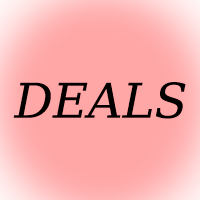
<style>
.page{position:relative;width:200px;height:200px;background:#ffa7a7}
.page>*{position:absolute;margin:0}
.t1{font:48px "DejaVuSerif-Italic";color:#000000}
</style>
<div class="page">
<p class="t1" style="left:13px;top:82px;width:173px;height:37px">DEALS</p>
</div>
